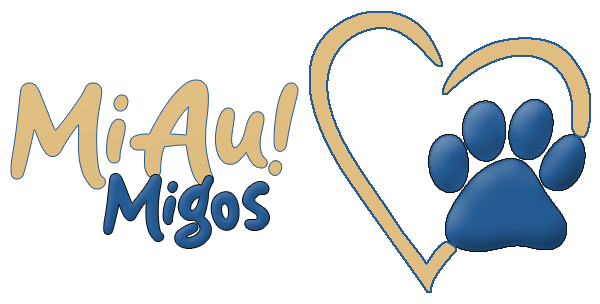
<style>
.page{position:relative;width:600px;height:304px;background:#ffffff}
.page>*{position:absolute;margin:0}
.t1{font:128px "Socake";color:#e0be82}
.t2{font:80px "Socake";color:#255b93}
.t3{font:128px "Socake";color:#255b93}
</style>
<div class="page">
<p class="t1" style="left:11px;top:80px;width:288px;height:109px">MiAu!</p>
<p class="t2" style="left:104px;top:174px;width:165px;height:74px"><span class="t3"><br>  </span>Migos</p>
</div>
